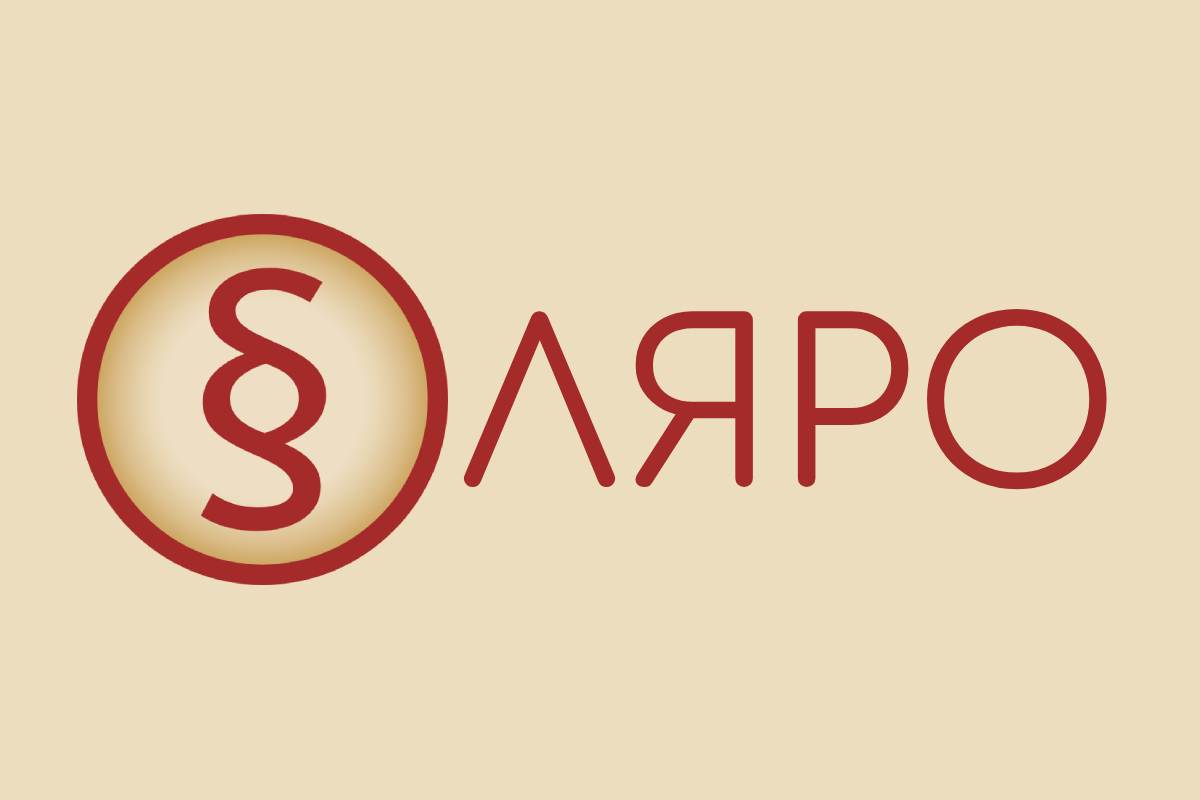
<style>
.page{position:relative;width:1200px;height:800px;background:#ecddbf}
.page>*{position:absolute;margin:0}
.t1{font:225px "Comfortaa-Regular";color:#a52a2a}
</style>
<div class="page">
<p class="t1" style="left:462px;top:309px;width:645px;height:181px">ЛЯРО</p>
</div>
